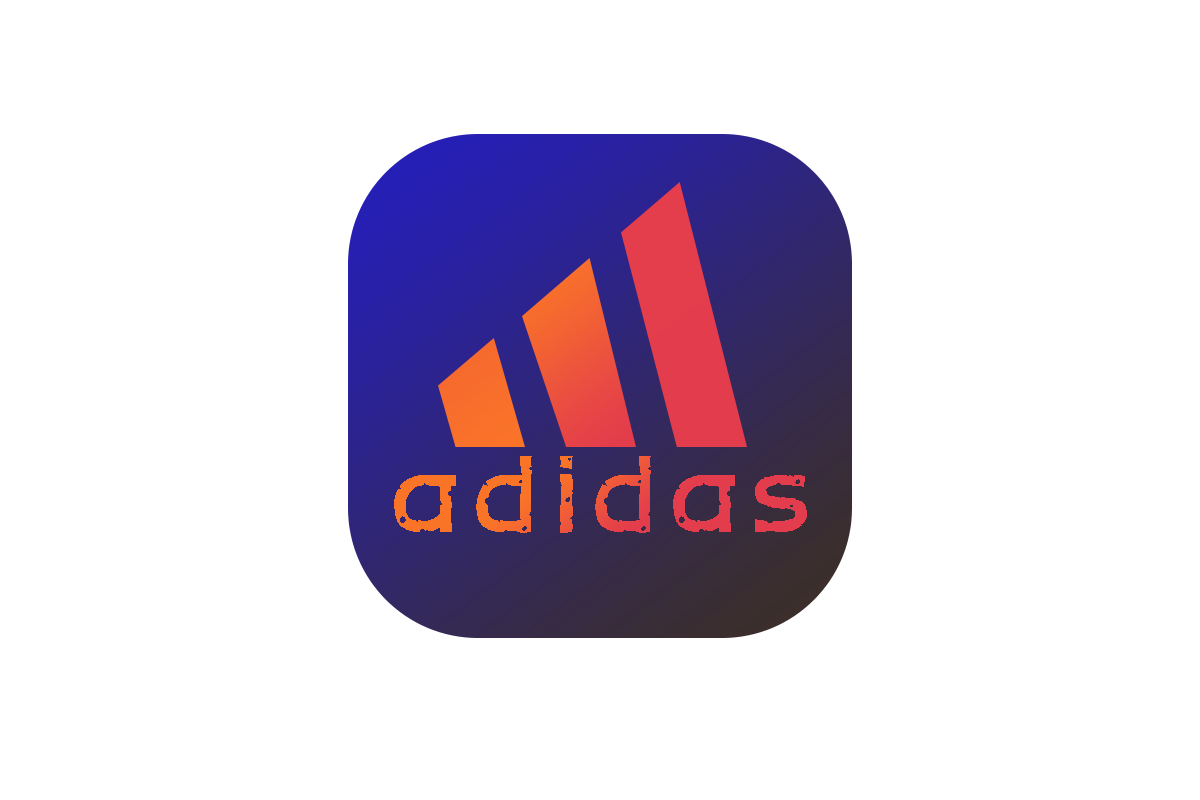
<style>
.page{position:relative;width:1200px;height:800px;background:#ffffff}
.page>*{position:absolute;margin:0}
.t1{font:104.9px "H2mkpB"}
</style>
<div class="page">
<p class="t1" style="left:394px;top:456px;width:413px;height:77px">adidas</p>
</div>
